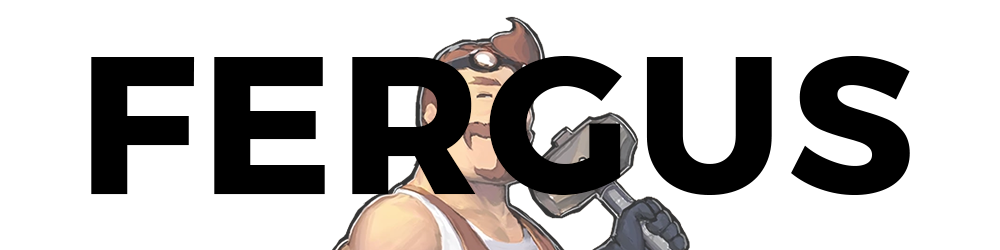
<style>
.page{position:relative;width:1000px;height:250px;background:#ffffff}
.page>*{position:absolute;margin:0}
.t1{font:196px "Montserrat-Bold";letter-spacing:0.025em;color:#000000}
</style>
<div class="page">
<p class="t1" style="left:91px;top:56px;width:819px;height:139px">FERGUS</p>
</div>
